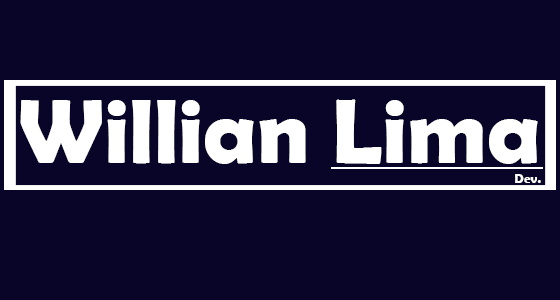
<style>
.page{position:relative;width:560px;height:300px;background:#080528}
.page>*{position:absolute;margin:0}
.t1{font:91.7px "BerlinSansFBDemi-Bold";color:#ffffff}
.t2{font:13.1px "BerlinSansFBDemi-Bold";color:#ffffff}
</style>
<div class="page">
<p class="t1" style="left:20px;top:99px;width:518px;height:65px">Willian Lima</p>
<p class="t2" style="left:515px;top:174px;width:26px;height:9px">Dev.</p>
</div>
